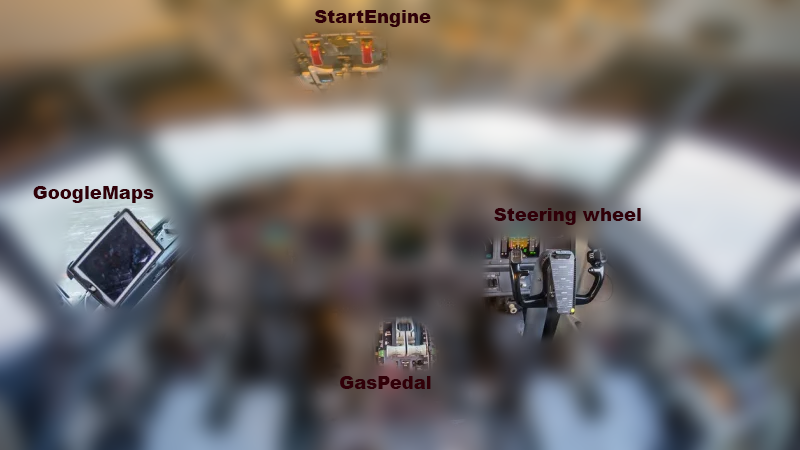
<style>
.page{position:relative;width:800px;height:450px}
.page>*{position:absolute;margin:0}
.t1{font:18px "Arial-Black";color:#300008}
.t2{font:18px "Arial-Black";color:#310008}
</style>
<div class="page">
<p class="t1" style="left:314px;top:10px;width:117px;height:17px">StartEngine</p>
<p class="t1" style="left:33px;top:186px;width:121px;height:17px">GoogleMaps</p>
<p class="t1" style="left:494px;top:208px;width:147px;height:17px">Steering wheel</p>
<p class="t2" style="left:340px;top:376px;width:91px;height:13px">GasPedal</p>
</div>
